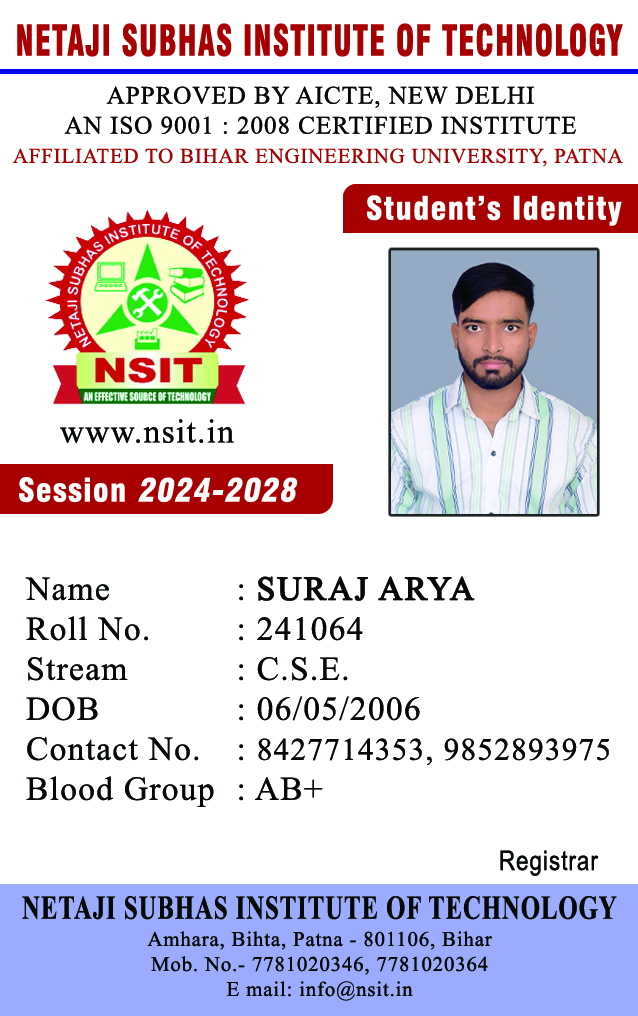
<style>
.page{position:relative;width:638px;height:1016px;background:#ffffff}
.page>*{position:absolute;margin:0}
.t1{font:41.7px "Swiss721BT-BlackCondensed";letter-spacing:0.04em;color:#a80000;scale:0.74 1}
.t2{font:25px "TimesNewRomanPSMT";letter-spacing:0.04em;color:#060808}
.t3{font:20.8px "TimesNewRomanPSMT";letter-spacing:0.04em;color:#a80000}
.t4{font:31.7px "Swiss721BT-BlackCondensed";letter-spacing:0.04em;color:#ffffff}
.t5{font:33.3px "TimesNewRomanPSMT";letter-spacing:0.04em;color:#060808}
.t6{font:31.7px "Swiss721BT-BlackCondensed";letter-spacing:0.04em;color:#ffffff;font-style:italic}
.t7{font:33.3px "TimesNewRomanPSMT";letter-spacing:0.04em;color:#060808;font-weight:bold}
.t8{font:31.2px "TimesNewRomanPSMT";letter-spacing:0.04em;color:#060808}
.t9{font:27.1px "ArialNarrow";letter-spacing:0.04em;color:#060808}
.t10{font:33.3px "TimesNewRomanPS-BoldMT";letter-spacing:0.04em;color:#060808;scale:0.74 1}
.t11{font:20.8px "TimesNewRomanPSMT";letter-spacing:0.04em;color:#060808}
</style>
<div class="page">
<p class="t1" style="left:17px;top:23px;width:606px;height:34px">NETAJI SUBHAS INSTITUTE OF TECHNOLOGY</p>
<p class="t2" style="left:64px;top:86px;width:512px;height:48px;text-align:center">APPROVED BY AICTE, NEW DELHI<br>AN ISO 9001 : 2008 CERTIFIED INSTITUTE</p>
<p class="t3" style="left:13px;top:148px;width:610px;height:19px">AFFILIATED TO BIHAR ENGINEERING UNIVERSITY, PATNA</p>
<p class="t4" style="left:367px;top:195px;width:255px;height:31px">Student’s Identity</p>
<p class="t5" style="left:60px;top:419px;width:174px;height:24px">www.nsit.in</p>
<p class="t6" style="left:19px;top:477px;width:279px;height:26px"><span class="t4">Session </span>2024-2028</p>
<p class="t5" style="left:25px;top:576px;width:585px;height:231px">Name   : <span class="t7">SURAJ ARYA<br></span>Roll No.   : 241064<br>Stream   : C.S.E.<br>DOB    : 06/05/2006<br>Contact No. : <span class="t8">8427714353, 9852893975<br></span>Blood Group : AB+</p>
<p class="t9" style="left:500px;top:850px;width:99px;height:26px">Registrar</p>
<p class="t10" style="left:22px;top:896px;width:595px;height:24px">NETAJI SUBHAS INSTITUTE OF TECHNOLOGY</p>
<p class="t11" style="left:147px;top:931px;width:345px;height:70px;text-align:center">Amhara, Bihta, Patna - 801106, Bihar<br>Mob. No.- 7781020346, 7781020364<br>E mail: info@nsit.in</p>
</div>
